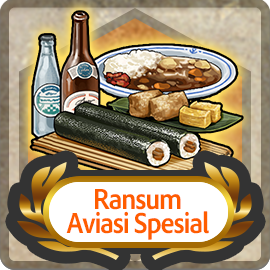
<style>
.page{position:relative;width:270px;height:270px}
.page>*{position:absolute;margin:0}
.t1{font:30px/24px "AdobeClean-Bold";letter-spacing:-0.04em;color:#ff5d00;scale:0.9 1}
</style>
<div class="page">
<p class="t1" style="left:66px;top:189px;width:143px;height:51px;text-align:center">Ransum<br>Aviasi Spesial</p>
</div>
